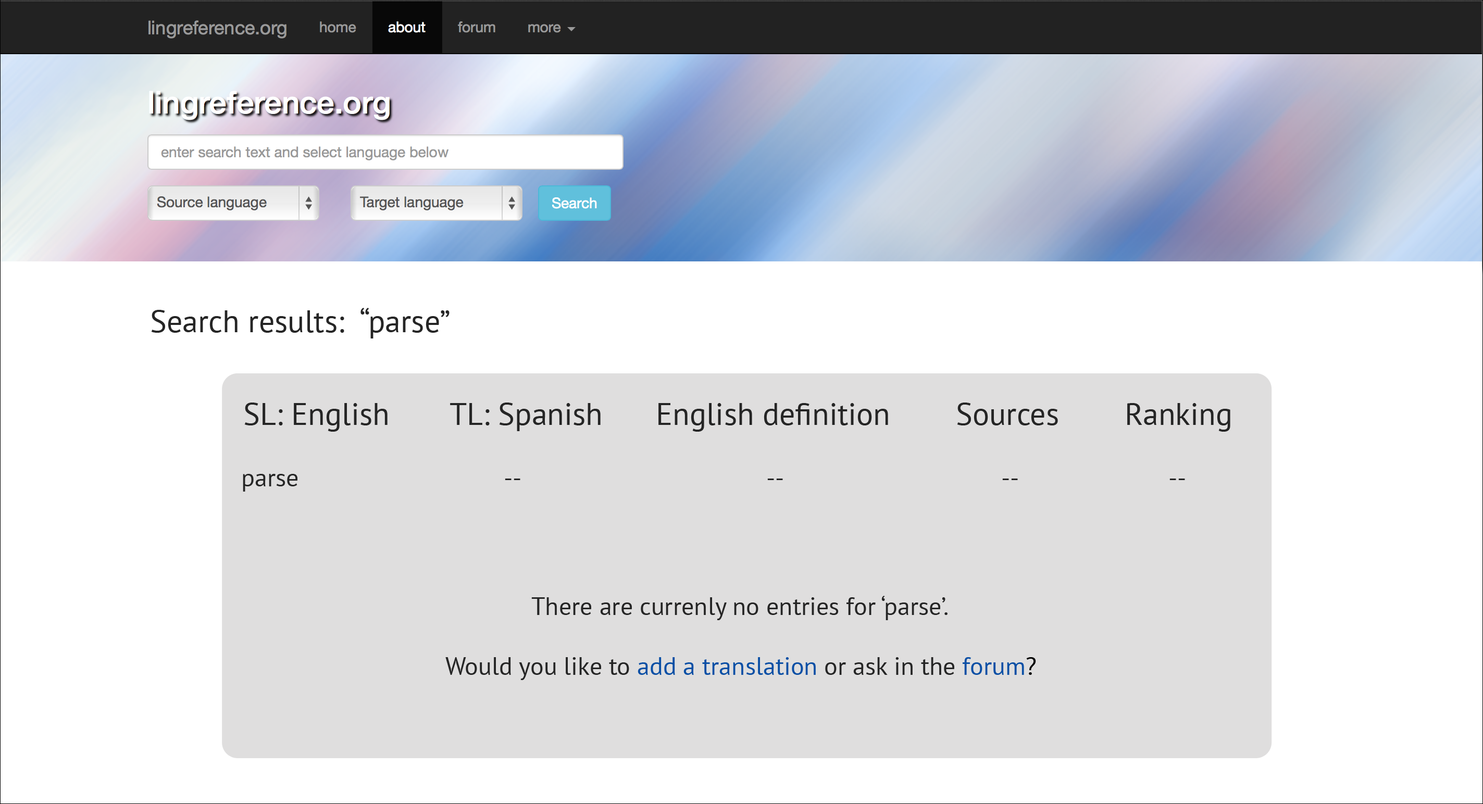
<style>
.page{position:relative;width:1483px;height:804px;background:#ffffff}
.page>*{position:absolute;margin:0}
.t1{font:31.2px "PTSans-Regular";color:#252525}
.t2{font:31.2px "MyriadPro-Regular";color:#252525}
.t3{font:25px "PTSans-Regular";color:#252525}
.t4{font:25px "PTSans-Regular";color:#0a4fa5}
.t5{font:25px "PTSans-Regular";color:#000000}
</style>
<div class="page">
<p class="t1" style="left:151px;top:308px;width:298px;height:31px">Search results: “parse”</p>
<p class="t1" style="left:244px;top:403px;width:986px;height:29px"><span class="t2"><br>     </span>SL: English    TL: Spanish   English definition    Sources    Ranking</p>
<p class="t3" style="left:243px;top:474px;width:942px;height:18px">parse               --              --                     --                       --</p>
<p class="t3" style="left:445px;top:596px;width:591px;height:84px">There are currenly no entries for ‘parse’.<br> <br>Would you like to <span class="t4">add a translation</span> or ask in the <span class="t4">forum</span><span class="t5">?</span></p>
</div>
